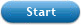
<style>
.page{position:relative;width:81px;height:25px}
.page>*{position:absolute;margin:0}
.t1{font:12px "TrebuchetMS-Bold";letter-spacing:0.05em;color:#ffffff}
</style>
<div class="page">
<p class="t1" style="left:26px;top:7px;width:30px;height:9px">Start</p>
</div>
